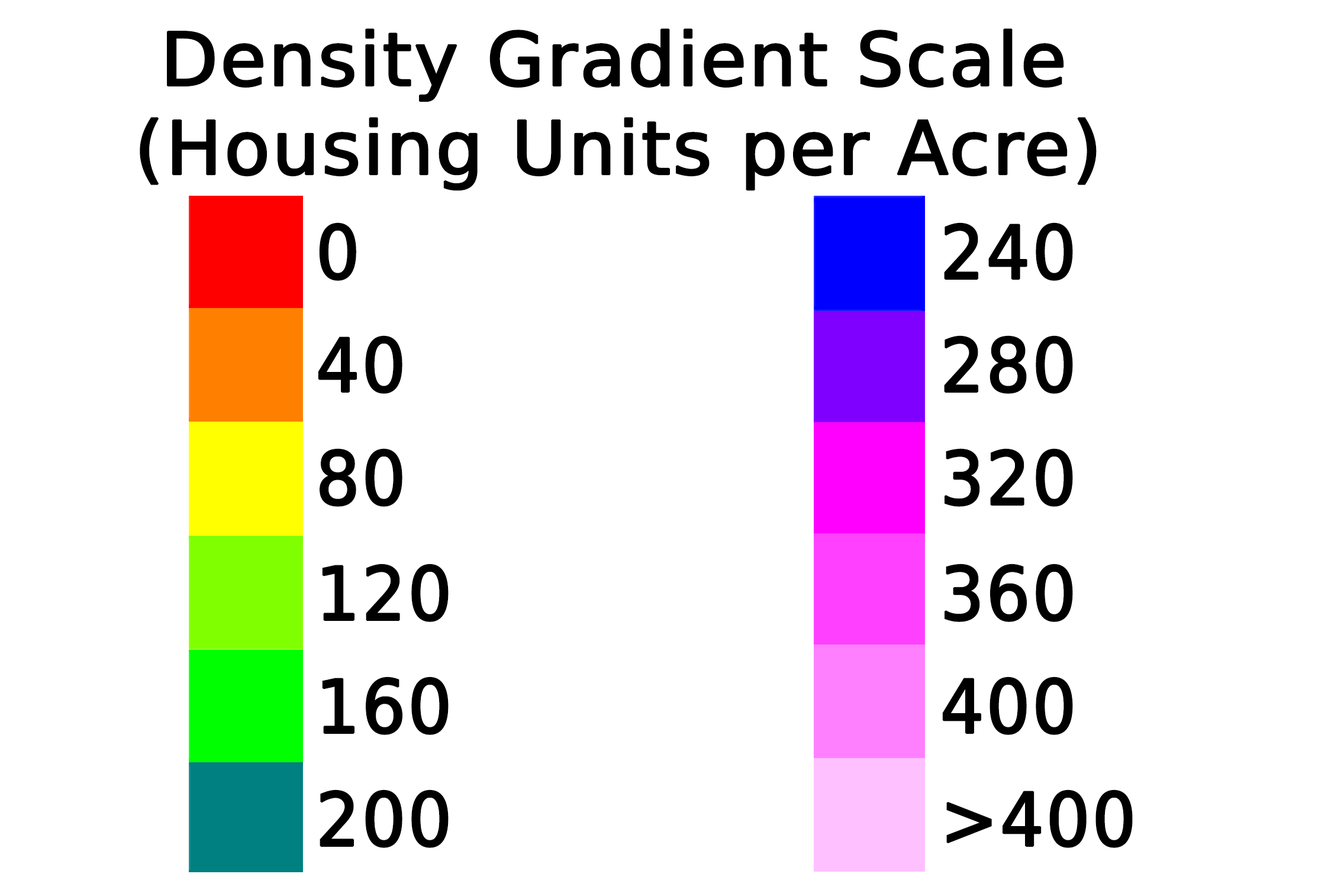
<style>
.page{position:relative;width:1344px;height:887px;background:#ffffff}
.page>*{position:absolute;margin:0}
.t1{font:74px "DejaVuSans";letter-spacing:0.008em;color:#000000;font-weight:bold}
.t2{font:74px "DejaVuSans";letter-spacing:0.008em;color:#000000;font-weight:bold;scale:0.93 1}
</style>
<div class="page">
<p class="t1" style="left:140px;top:28px;width:956px;height:163px">Density Gradient Scale<br>(Housing Units per Acre)</p>
<p class="t2" style="left:319px;top:222px;width:37px;height:59px">0</p>
<p class="t2" style="left:944px;top:222px;width:129px;height:59px">240</p>
<p class="t2" style="left:318px;top:335px;width:84px;height:59px">40</p>
<p class="t2" style="left:944px;top:335px;width:129px;height:59px">280</p>
<p class="t2" style="left:319px;top:448px;width:83px;height:59px">80</p>
<p class="t2" style="left:944px;top:448px;width:129px;height:59px">320</p>
<p class="t2" style="left:322px;top:564px;width:126px;height:58px">120</p>
<p class="t2" style="left:944px;top:564px;width:129px;height:58px">360</p>
<p class="t2" style="left:322px;top:677px;width:126px;height:58px">160</p>
<p class="t2" style="left:942px;top:677px;width:131px;height:58px">400</p>
<p class="t2" style="left:319px;top:790px;width:129px;height:58px">200</p>
<p class="t2" style="left:946px;top:790px;width:186px;height:58px">&gt;400</p>
</div>
